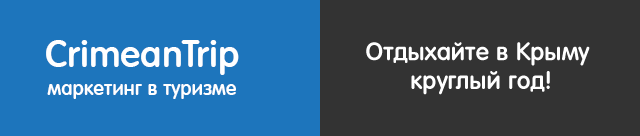
<style>
.page{position:relative;width:640px;height:136px;background:#333333}
.page>*{position:absolute;margin:0}
.t1{font:36px "AFuturaRoundDemi";color:#ffffff}
.t2{font:24px "AFuturaRoundDemi";color:#ffffff}
.t3{font:19.1px "AFuturaRoundDemi";color:#ffffff}
</style>
<div class="page">
<p class="t1" style="left:46px;top:40px;width:193px;height:35px">CrimeanTrip</p>
<p class="t2" style="left:366px;top:42px;width:224px;height:53px;text-align:center">Отдыхайте в Крыму <br>круглый год!</p>
<p class="t3" style="left:47px;top:84px;width:189px;height:15px">маркетинг в туризме</p>
</div>
